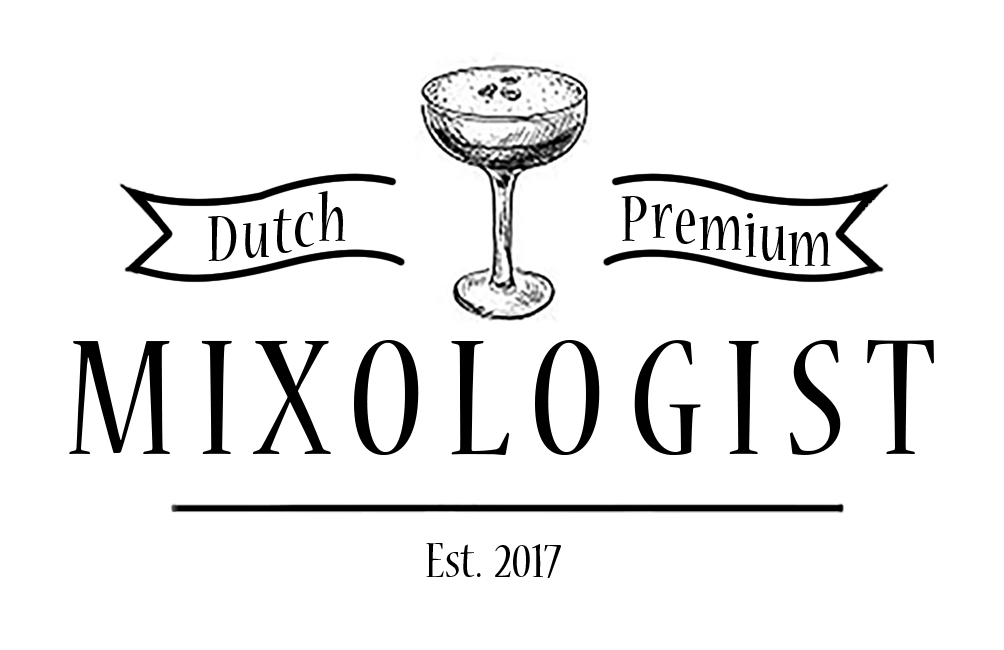
<style>
.page{position:relative;width:1004px;height:650px;background:#ffffff}
.page>*{position:absolute;margin:0}
.t1{font:73.4px "NuevaStd-Cond";color:#000000;scale:0.97 1}
.t2{font:183.6px "NuevaStd-Cond";color:#000000;scale:0.97 1}
.t3{font:55.1px "NuevaStd-Cond";color:#000000;scale:0.97 1}
</style>
<div class="page">
<p class="t1" style="left:318px;top:191px;width:28px;height:50px">h</p>
<p class="t1" style="left:621px;top:196px;width:26px;height:45px">P</p>
<p class="t1" style="left:273px;top:208px;width:19px;height:45px">t</p>
<p class="t1" style="left:651px;top:204px;width:21px;height:34px">r</p>
<p class="t1" style="left:676px;top:209px;width:19px;height:35px">e</p>
<p class="t1" style="left:208px;top:216px;width:29px;height:45px">D</p>
<p class="t1" style="left:295px;top:212px;width:19px;height:35px">c</p>
<p class="t1" style="left:699px;top:216px;width:43px;height:34px">m</p>
<p class="t1" style="left:745px;top:213px;width:12px;height:44px">i</p>
<p class="t1" style="left:243px;top:223px;width:26px;height:35px">u</p>
<p class="t1" style="left:760px;top:226px;width:26px;height:35px">u</p>
<p class="t1" style="left:788px;top:232px;width:43px;height:34px">m</p>
<p class="t2" style="left:69px;top:340px;width:865px;height:115px">M I X O L O G I S T</p>
<p class="t3" style="left:426px;top:543px;width:135px;height:35px">Est.  2017</p>
</div>
